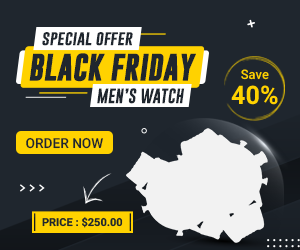
<style>
.page{position:relative;width:300px;height:250px;background:#1f262e}
.page>*{position:absolute;margin:0}
.t1{font:15.2px "GoboldBold";color:#1f262e}
.t2{font:27.4px "GoboldBold";color:#1f262e;font-weight:bold}
.t3{font:13.1px "Heebo-Medium";color:#ffd200}
.t4{font:25.5px "Heebo-Bold";color:#ffd200}
.t5{font:13.8px "Heebo-Medium";color:#1f262e}
.t6{font:11px "Heebo-Bold";color:#1f262e}
</style>
<div class="page">
<p class="t1" style="left:42px;top:32px;width:91px;height:14px">special offer</p>
<p class="t2" style="left:29px;top:53px;width:167px;height:29px">BLACK FRIDAY</p>
<p class="t3" style="left:241px;top:69px;width:28px;height:11px">Save</p>
<p class="t1" style="left:97px;top:88px;width:88px;height:16px">MEN’S WATCH</p>
<p class="t4" style="left:231px;top:85px;width:47px;height:20px">40%</p>
<p class="t5" style="left:26px;top:137px;width:77px;height:12px">ORDER NOW</p>
<p class="t6" style="left:42px;top:217px;width:81px;height:11px">PRICE : $250.00</p>
</div>
